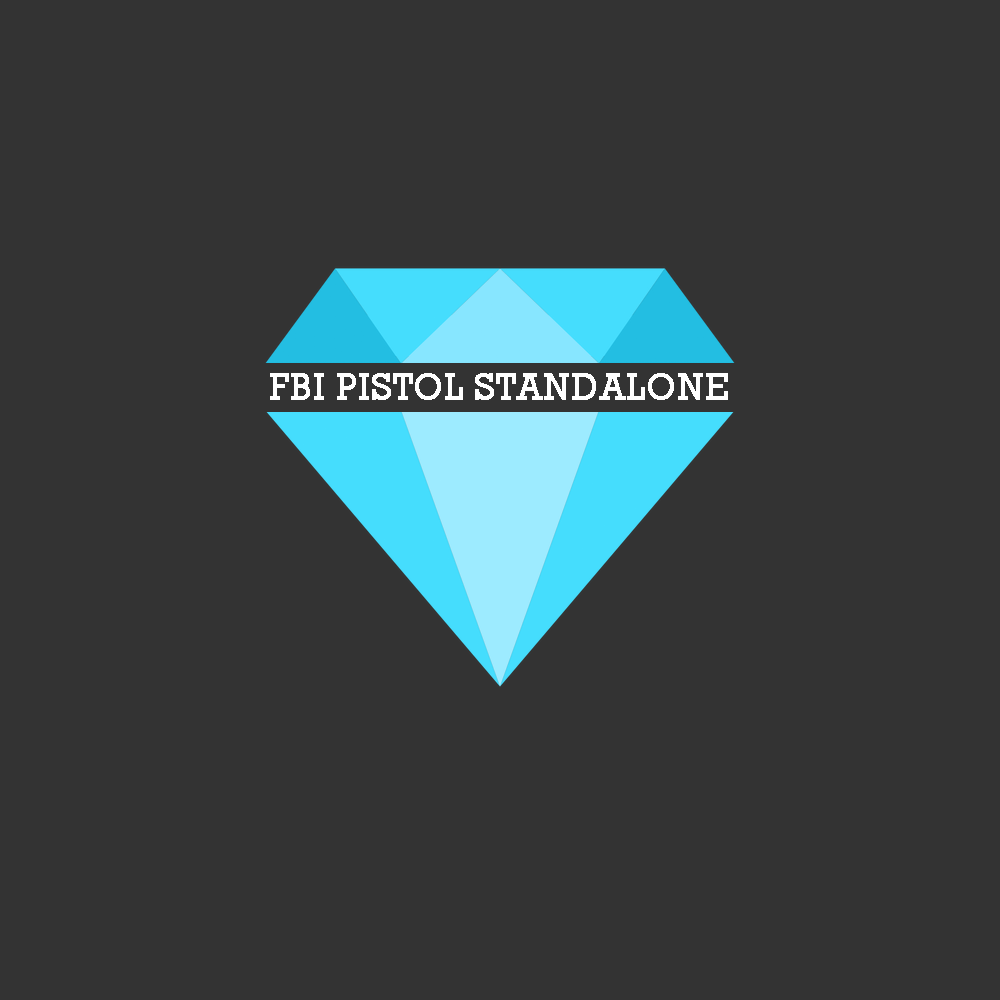
<style>
.page{position:relative;width:1000px;height:1000px;background:#333333}
.page>*{position:absolute;margin:0}
.t1{font:37px "Rockwell";color:#ffffff;font-weight:bold}
</style>
<div class="page">
<p class="t1" style="left:270px;top:373px;width:458px;height:27px">FBI PISTOL STANDALONE</p>
</div>
